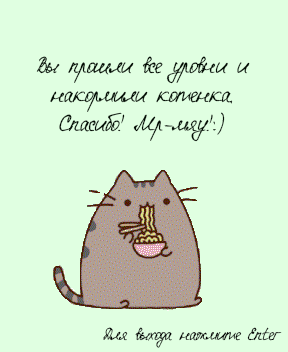
<style>
.page{position:relative;width:288px;height:352px;background:#e0ffe1}
.page>*{position:absolute;margin:0}
.t1{font:24px "Eskal-Font4You";color:#020c03}
.t2{font:18px "Eskal-Font4You";color:#010101}
</style>
<div class="page">
<p class="t1" style="left:36px;top:56px;width:214px;height:86px;text-align:center">Вы прошли все уровни и накормили котенка. <br>Спасибо! Мр-мяу!:)</p>
<p class="t2" style="left:103px;top:327px;width:179px;height:21px">Для выхода нажмите Enter</p>
</div>
